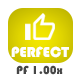
<style>
.page{position:relative;width:80px;height:80px;background:#ffffff}
.page>*{position:absolute;margin:0}
.t1{font:15px "Bauhaus93";color:#ffffff}
.t2{font:12px "Bauhaus93";color:#464646}
</style>
<div class="page">
<p class="t1" style="left:11px;top:46px;width:58px;height:12px">PERFECT</p>
<p class="t2" style="left:16px;top:65px;width:47px;height:10px">PF 1.00x</p>
</div>
